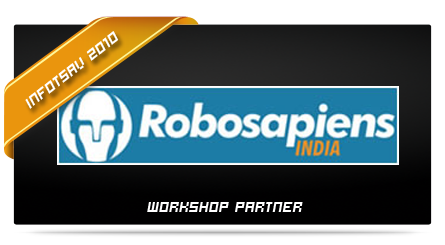
<style>
.page{position:relative;width:445px;height:245px}
.page>*{position:absolute;margin:0}
.t1{font:16px "Hooge0555";color:#ffffff;font-style:italic}
.t2{font:15.9px "Hooge0555";color:#ffffff;font-style:italic}
</style>
<div class="page">
<p class="t1" style="left:25px;top:31px;width:94px;height:78px;rotate:-38deg">Infotsav 2010</p>
<p class="t2" style="left:147px;top:202px;width:156px;height:10px">Workshop partner</p>
</div>
